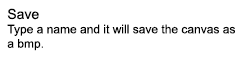
<style>
.page{position:relative;width:240px;height:60px;background:#ffffff}
.page>*{position:absolute;margin:0}
.t1{font:12px "ArialMT";color:#000000}
.t2{font:14px "ArialMT";color:#000000}
</style>
<div class="page">
<p class="t1" style="left:7px;top:8px;width:228px;height:43px"><span class="t2">Save<br></span>Type a name and it will save the canvas as<br>a bmp.</p>
</div>
